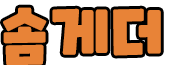
<style>
.page{position:relative;width:188px;height:65px;background:#e88337}
.page>*{position:absolute;margin:0}
.t1{font:60px "CookieRunOTF-Black";color:#e88337}
</style>
<div class="page">
<p class="t1" style="left:3px;top:7px;width:158px;height:59px">솜게더</p>
</div>
